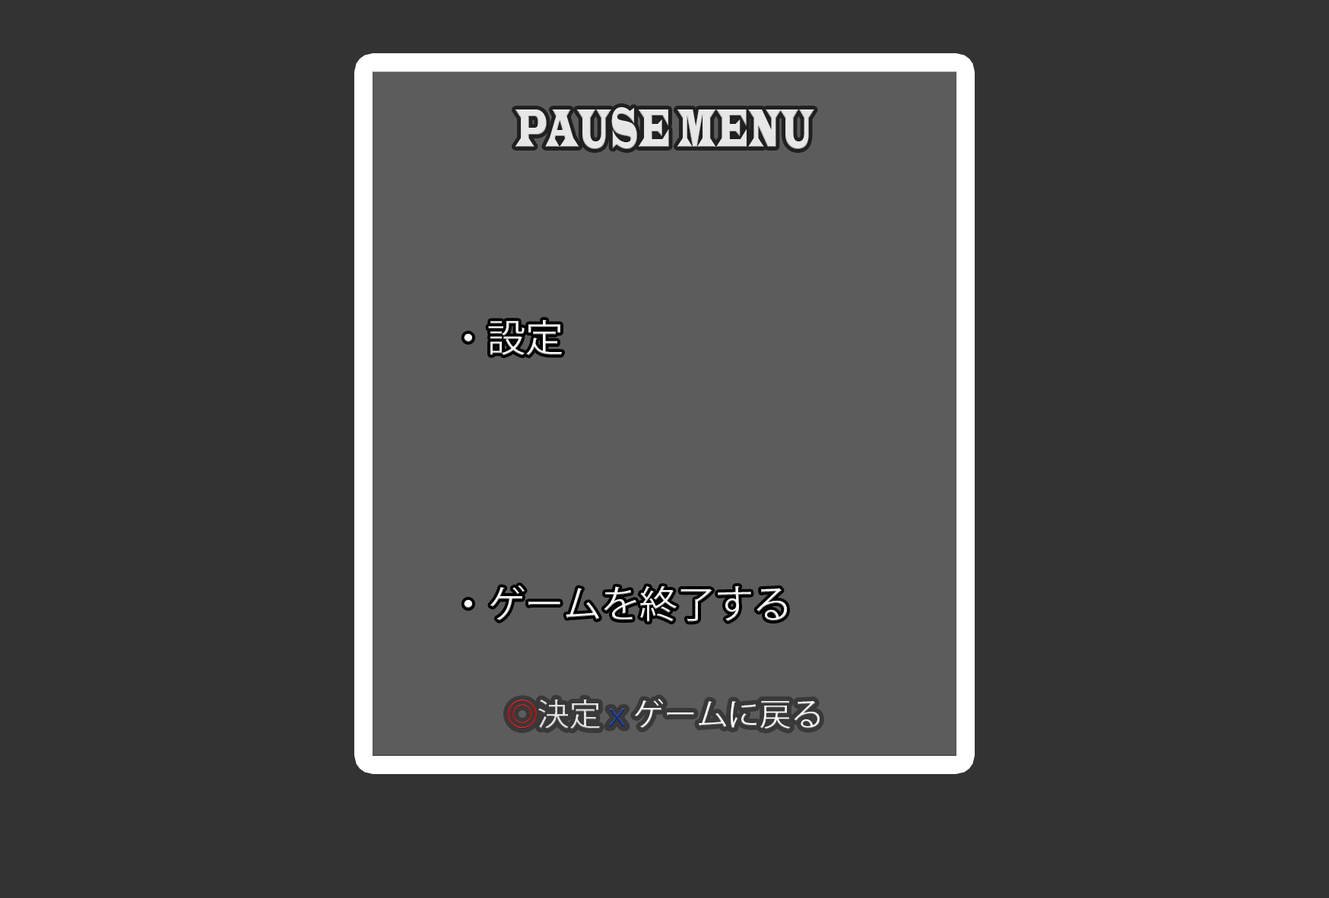
<style>
.page{position:relative;width:1329px;height:898px;background:#333333}
.page>*{position:absolute;margin:0}
.t1{font:56.1px "LatinWide";color:#e7e7e7;scale:0.41 1}
.t2{font:38px "KozGoPr6N-Regular";color:#fefefe}
.t3{font:31.7px "KozGoPr6N-Regular";color:#fffefe}
.t4{font:31.7px "KozGoPr6N-Regular";color:#e70000}
.t5{font:31.7px "KozGoPr6N-Regular";color:#e7e7e7}
.t6{font:31.7px "KozGoPr6N-Regular";color:#0b308f}
</style>
<div class="page">
<p class="t1" style="left:515px;top:107px;width:299px;height:42px">PAUSE MENU</p>
<p class="t2" style="left:464px;top:319px;width:323px;height:303px;text-align:center">・設定　　　　　　　　　<br>　　<br><br>　　　　　　<br>　　・ゲームを終了する</p>
<p class="t3" style="left:508px;top:698px;width:311px;height:31px"><span class="t4">◎</span><span class="t5">決定</span><span class="t6">ⅹ</span>ゲームに戻る</p>
</div>
